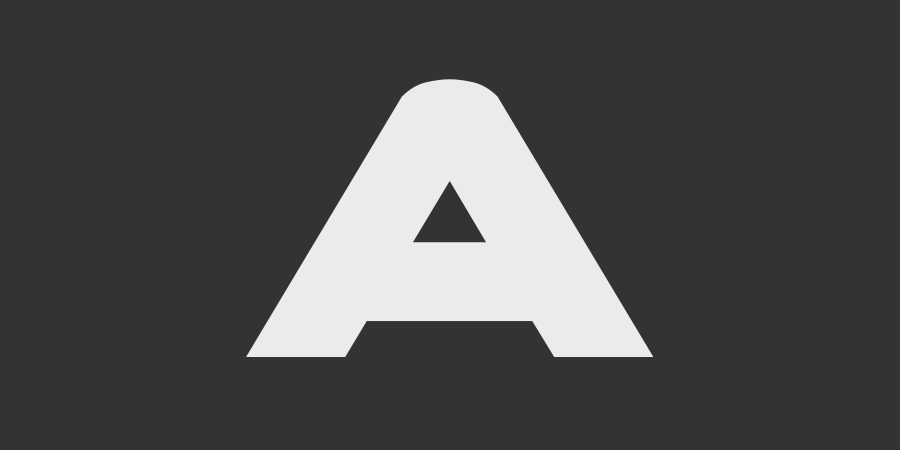
<style>
.page{position:relative;width:900px;height:450px;background:#333333}
.page>*{position:absolute;margin:0}
.t1{font:423.3px "PilotCommandSpaced";color:#eaebeb}
</style>
<div class="page">
<p class="t1" style="left:246px;top:79px;width:408px;height:278px">A</p>
</div>
